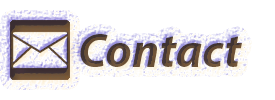
<style>
.page{position:relative;width:275px;height:100px;background:#ffffff}
.page>*{position:absolute;margin:0}
.t1{font:48px "MyriadPro-BoldIt"}
</style>
<div class="page">
<p class="t1" style="left:80px;top:34px;width:162px;height:33px">Contact</p>
</div>
